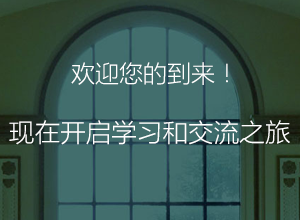
<style>
.page{position:relative;width:300px;height:220px;background:#426e6d}
.page>*{position:absolute;margin:0}
.t1{font:24px "MicrosoftYaHeiLight";color:#ffffff}
.t2{font:25.6px "MicrosoftYaHeiLight";color:#ffffff}
</style>
<div class="page">
<p class="t1" style="left:71px;top:62px;width:157px;height:23px">欢迎您的到来！</p>
<p class="t2" style="left:9px;top:120px;width:281px;height:25px">现在开启学习和交流之旅</p>
</div>
